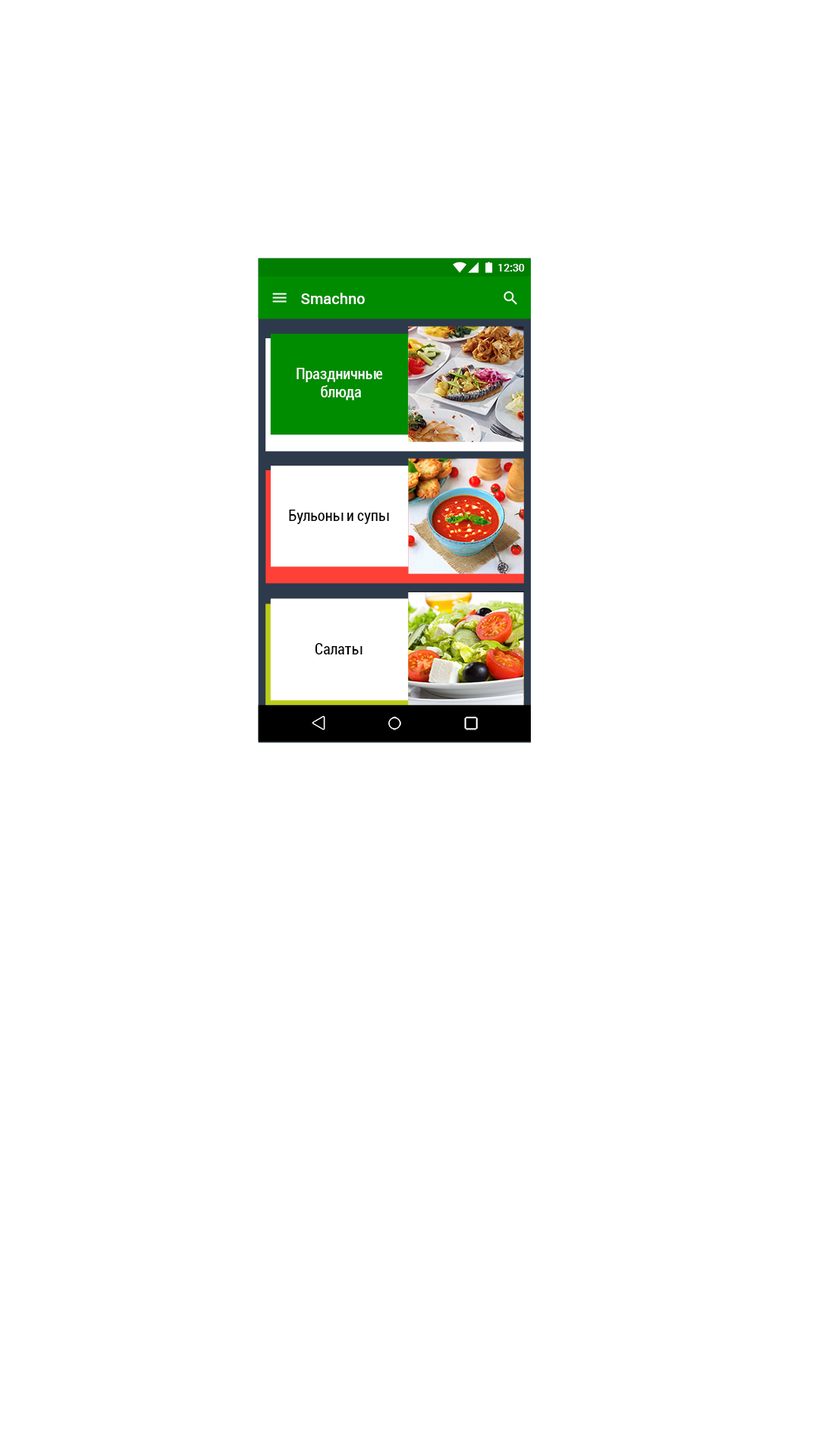
<style>
.page{position:relative;width:819px;height:1456px;background:#ffffff}
.page>*{position:absolute;margin:0}
.t1{font:10.6px "Roboto-Medium";color:#ffffff}
.t2{font:15.1px "Roboto-Medium";color:#ffffff}
.t3{font:15.1px "Roboto-Condensed";color:#ffffff}
.t4{font:15.1px "Roboto-Condensed";color:#000000}
</style>
<div class="page">
<p class="t1" style="left:498px;top:264px;width:27px;height:7px">12:30</p>
<p class="t2" style="left:301px;top:293px;width:64px;height:11px">Smachno</p>
<p class="t3" style="left:297px;top:368px;width:86px;height:32px;text-align:center">Праздничные <br>блюда</p>
<p class="t4" style="left:289px;top:510px;width:100px;height:14px">Бульоны и супы</p>
<p class="t4" style="left:315px;top:643px;width:47px;height:11px">Салаты</p>
</div>
